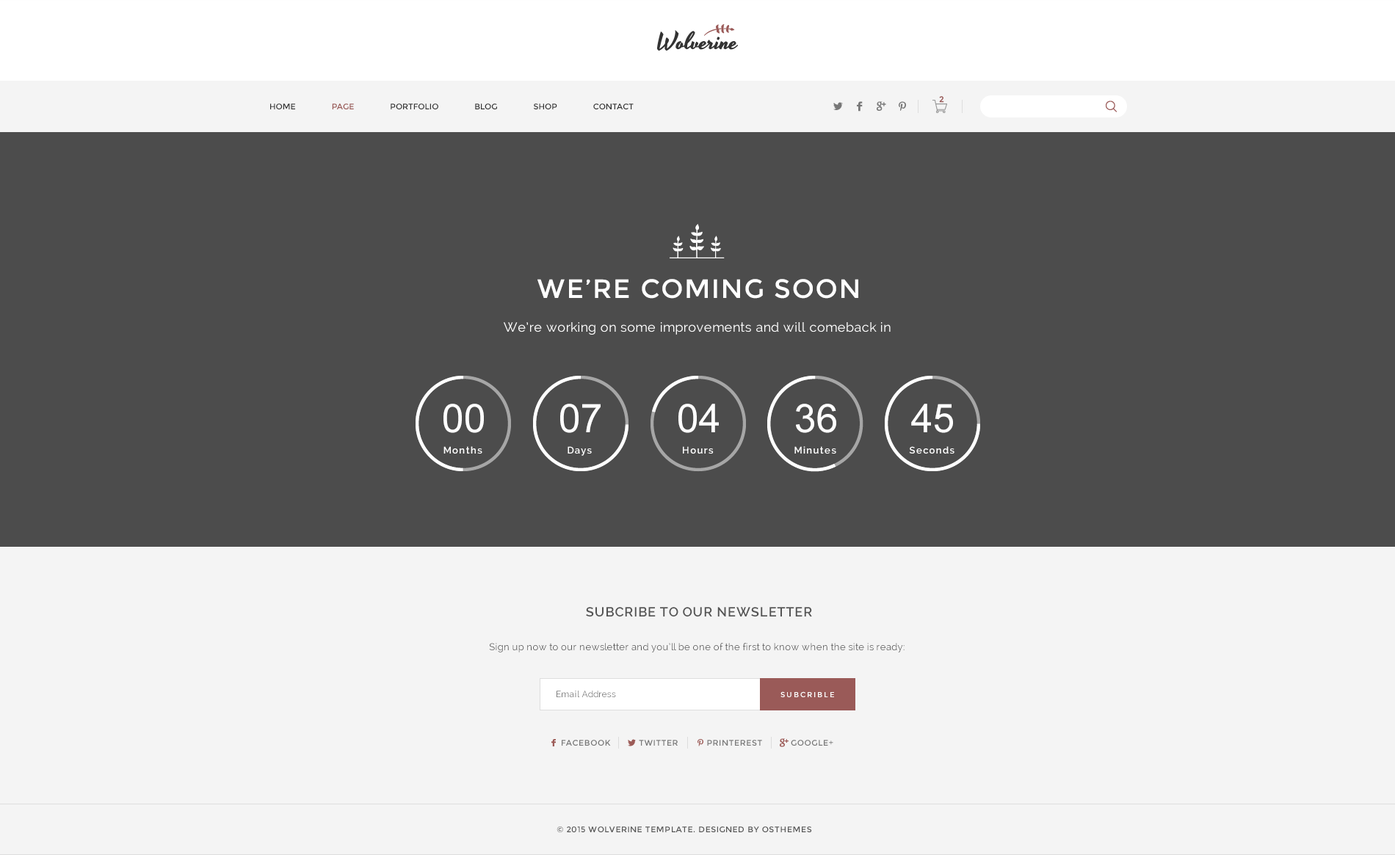
<style>
.page{position:relative;width:1395px;height:855px;background:#4c4c4c}
.page>*{position:absolute;margin:0}
.t1{font:8.1px "Montserrat-Regular";color:#9a5a58;font-weight:bold}
.t2{font:8.1px "Montserrat-Regular";color:#333333}
.t3{font:8.1px "Montserrat-Regular";color:#9b5a57}
.t4{font:26.4px "Montserrat-Regular";letter-spacing:0.05em;color:#ffffff}
.t5{font:13.2px "Raleway";letter-spacing:0.02em;color:#ffffff}
.t6{font:39.6px "ArialMT";color:#ffffff}
.t7{font:9.5px "Raleway-SemiBold";letter-spacing:0.1em;color:#ffffff}
.t8{font:13.2px "Raleway-SemiBold";letter-spacing:0.05em;color:#545454}
.t9{font:9.5px "Raleway";letter-spacing:0.02em;color:#555555}
.t10{font:8.8px "Raleway";letter-spacing:0.02em;color:#777777}
.t11{font:7.3px "Montserrat-Regular";letter-spacing:0.2em;color:#ffffff}
.t12{font:8.1px "Montserrat-Regular";letter-spacing:0.05em;color:#777777}
.t13{font:8.1px "Montserrat-Regular";letter-spacing:0.05em;color:#555555}
</style>
<div class="page">
<p class="t1" style="left:939px;top:96px;width:5px;height:7px">2</p>
<p class="t2" style="left:270px;top:103px;width:363px;height:6px">HOME      <span class="t3">PAGE</span>      PORTFOLIO      BLOG      SHOP      CONTACT</p>
<p class="t4" style="left:537px;top:279px;width:321px;height:20px">WE’RE COMING SOON</p>
<p class="t5" style="left:504px;top:322px;width:386px;height:13px">We’re working on some improvements and will comeback in</p>
<p class="t6" style="left:443px;top:404px;width:41px;height:29px">00</p>
<p class="t6" style="left:560px;top:404px;width:40px;height:29px">07</p>
<p class="t6" style="left:678px;top:404px;width:41px;height:29px">04</p>
<p class="t6" style="left:796px;top:404px;width:40px;height:29px">36</p>
<p class="t6" style="left:911px;top:404px;width:42px;height:29px">45</p>
<p class="t7" style="left:443px;top:446px;width:39px;height:8px">Months</p>
<p class="t7" style="left:567px;top:446px;width:25px;height:10px">Days</p>
<p class="t7" style="left:683px;top:446px;width:30px;height:8px">Hours</p>
<p class="t7" style="left:794px;top:446px;width:42px;height:8px">Minutes</p>
<p class="t7" style="left:909px;top:446px;width:45px;height:8px">Seconds</p>
<p class="t8" style="left:586px;top:607px;width:226px;height:10px">SUBCRIBE TO OUR NEWSLETTER</p>
<p class="t9" style="left:489px;top:643px;width:415px;height:9px">Sign up now to our newsletter and you’ll be one of the first to know when the site is ready:</p>
<p class="t10" style="left:556px;top:691px;width:60px;height:6px">Email Address</p>
<p class="t11" style="left:780px;top:691px;width:54px;height:6px">SUBCRIBLE</p>
<p class="t12" style="left:561px;top:740px;width:272px;height:6px">FACEBOOK             TWITTER             PRINTEREST             GOOGLE+</p>
<p class="t13" style="left:556px;top:826px;width:256px;height:7px">© 2015 WOLVERINE TEMPLATE. DESIGNED BY OSTHEMES</p>
</div>
